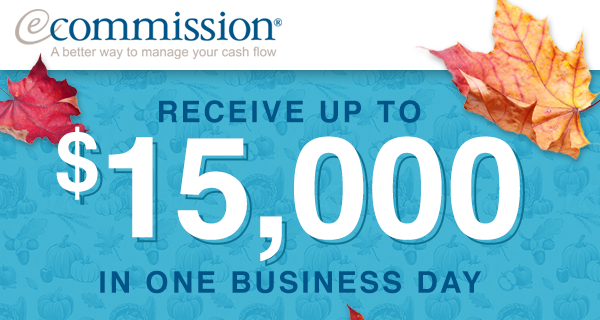
<style>
.page{position:relative;width:600px;height:320px;background:#ffffff}
.page>*{position:absolute;margin:0}
.t1{font:30px "Helvetica-Bold";letter-spacing:0.1em;color:#005488;text-transform:uppercase}
.t2{font:140.8px "Helvetica-Bold";color:#ffffff}
</style>
<div class="page">
<p class="t1" style="left:159px;top:100px;width:262px;height:23px">Receive up to</p>
<p class="t2" style="left:56px;top:126px;width:464px;height:135px">$15,000</p>
<p class="t2" style="left:61px;top:131px;width:464px;height:135px">$15,000</p>
<p class="t1" style="left:100px;top:270px;width:382px;height:24px">in one business day</p>
</div>
